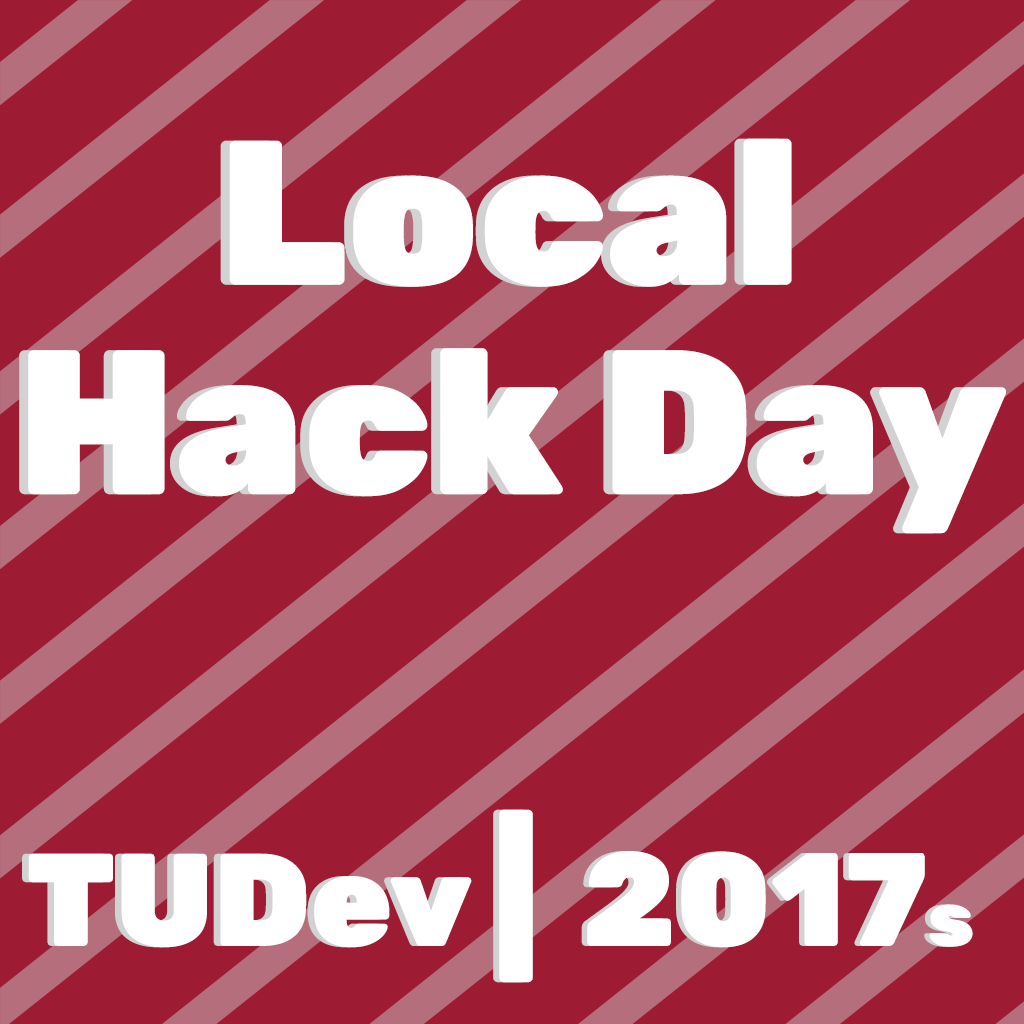
<style>
.page{position:relative;width:1024px;height:1024px;background:#9e1b34}
.page>*{position:absolute;margin:0}
.t1{font:205.4px/205.4px "Rubik-Black";color:#ffffff}
.t2{font:205.4px/39.6px "Rubik-Black";color:#ffffff}
.t3{font:156px "Rubik-Black";color:#ffffff;scale:1.13 1}
.t4{font:131.5px "Rubik-Black";color:#ffffff}
.t5{font:132.6px "Rubik-Black";color:#ffffff}
.t6{font:77.9px "Rubik-Black";color:#ffffff}
</style>
<div class="page">
<p class="t1" style="left:19px;top:138px;width:978px;height:396px;text-align:center"><span class="t2">Local</span><br>Hack Day</p>
<p class="t1" style="left:28px;top:138px;width:978px;height:396px;text-align:center"><span class="t2">Local</span><br>Hack Day</p>
<p class="t3" style="left:493px;top:809px;width:34px;height:174px">|</p>
<p class="t3" style="left:499px;top:809px;width:34px;height:174px">|</p>
<p class="t4" style="left:22px;top:853px;width:443px;height:95px">TUDev</p>
<p class="t4" style="left:28px;top:853px;width:444px;height:95px">TUDev</p>
<p class="t5" style="left:581px;top:851px;width:386px;height:97px">2017<span class="t6">s</span></p>
<p class="t5" style="left:587px;top:851px;width:386px;height:97px">2017<span class="t6">s</span></p>
</div>
